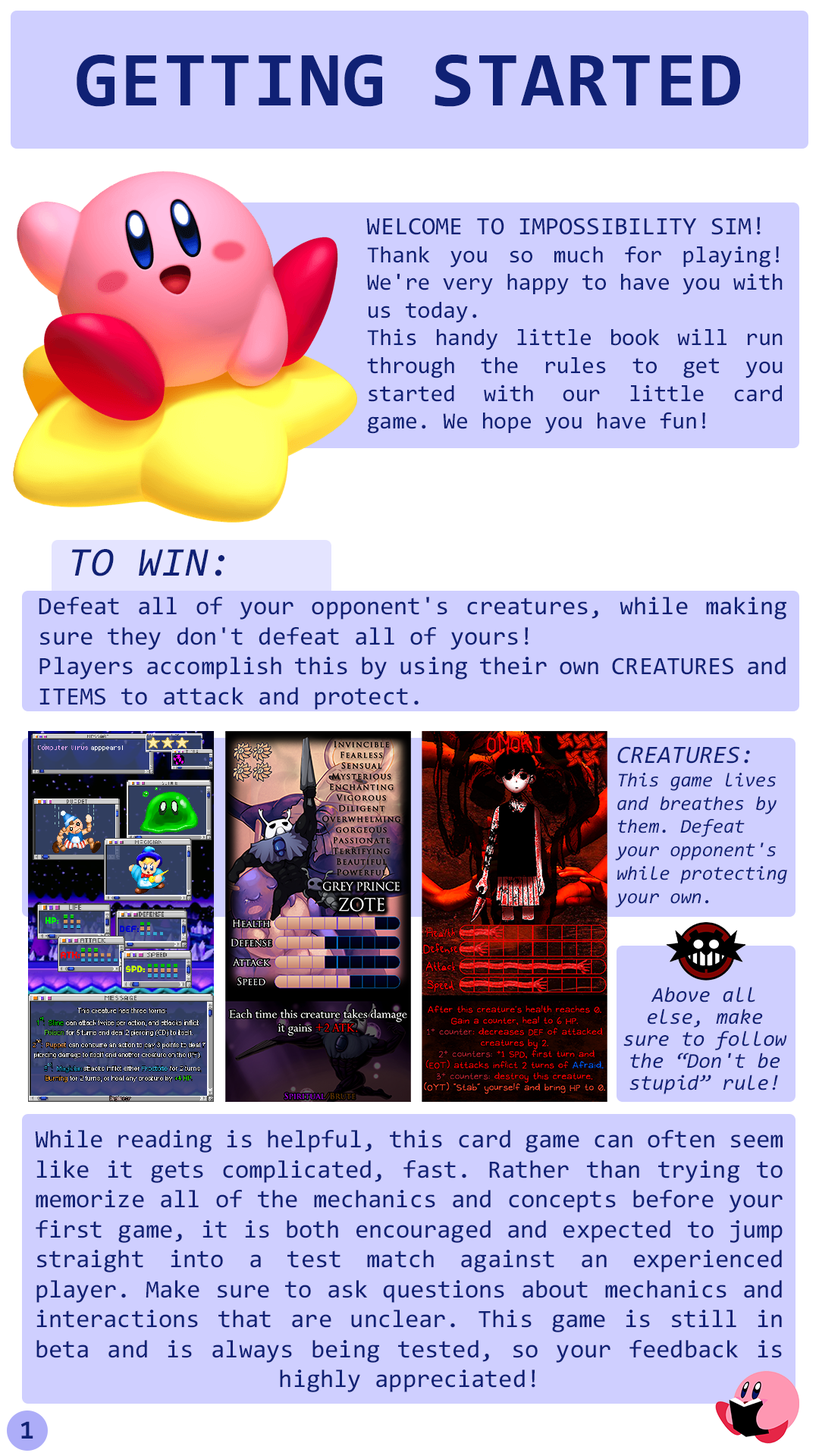
<style>
.page{position:relative;width:819px;height:1456px;background:#cfcfff}
.page>*{position:absolute;margin:0}
.t1{font:78.3px "Consolas-Bold";letter-spacing:0.02em;color:#102175}
.t2{font:23.1px "Consolas";color:#102175}
.t3{font:25px "Consolas";color:#102175}
.t4{font:41.1px "Consolas-Italic";letter-spacing:0.02em;color:#102175}
.t5{font:19.4px "Consolas-Italic";color:#102175}
.t6{font:25px "Consolas-Italic";color:#102175}
.t7{font:21.2px/22px "Consolas-Italic";color:#102175}
.t8{font:26.4px "Consolas-Bold";color:#102175}
</style>
<div class="page">
<p class="t1" style="left:77px;top:55px;width:663px;height:52px">GETTING STARTED</p>
<p class="t2" style="left:366px;top:217px;width:417px;height:217px;text-align:justify"><span class="t3">WELCOME TO IMPOSSIBILITY SIM!<br></span>Thank you so much for playing! We're very happy to have you with us today. <br>This handy little book will run through the rules to get you started with our little card game. We hope you have fun!</p>
<p class="t4" style="left:71px;top:549px;width:153px;height:27px">TO WIN:</p>
<p class="t3" style="left:39px;top:597px;width:747px;height:113px;text-align:justify">Defeat all of your opponent's creatures, while making sure they don't defeat all of yours!<br>Players accomplish this by using their own CREATURES and ITEMS to attack and protect.</p>
<p class="t5" style="left:615px;top:746px;width:172px;height:162px"><span class="t6">CREATURES:<br></span>This game lives and breathes by them. Defeat your opponent's while protecting your own.</p>
<p class="t7" style="left:623px;top:987px;width:164px;height:107px;text-align:center">Above all else, make sure to follow the “Don't be stupid” rule!</p>
<p class="t3" style="left:35px;top:1130px;width:748px;height:262px;text-align:justify">While reading is helpful, this card game can often seem like it gets complicated, fast. Rather than trying to memorize all of the mechanics and concepts before your first game, it is both encouraged and expected to jump straight into a test match against an experienced player. Make sure to ask questions about mechanics and interactions that are unclear. This game is still in beta and is always being tested, so your feedback is highly appreciated!</p>
<p class="t8" style="left:20px;top:1421px;width:13px;height:18px">1</p>
</div>
